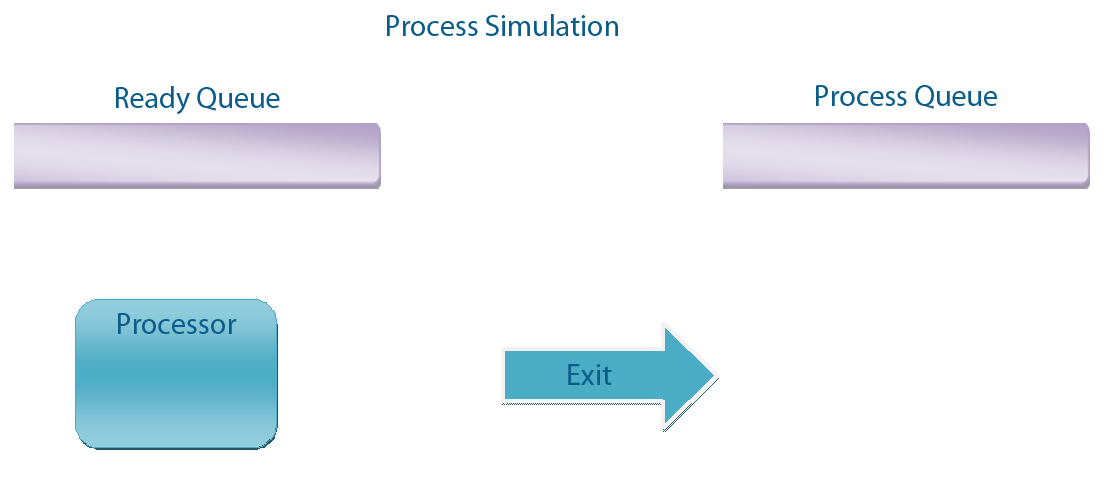
<style>
.page{position:relative;width:1120px;height:479px;background:#ffffff}
.page>*{position:absolute;margin:0}
.t1{font:30px "MyriadPro-Regular";color:#0a5c8b}
</style>
<div class="page">
<p class="t1" style="left:387px;top:14px;width:231px;height:22px">Process Simulation</p>
<p class="t1" style="left:116px;top:86px;width:164px;height:29px">Ready Queue</p>
<p class="t1" style="left:816px;top:85px;width:181px;height:24px">Process Queue</p>
<p class="t1" style="left:118px;top:313px;width:119px;height:21px">Processor</p>
<p class="t1" style="left:568px;top:364px;width:44px;height:21px">Exit</p>
</div>
